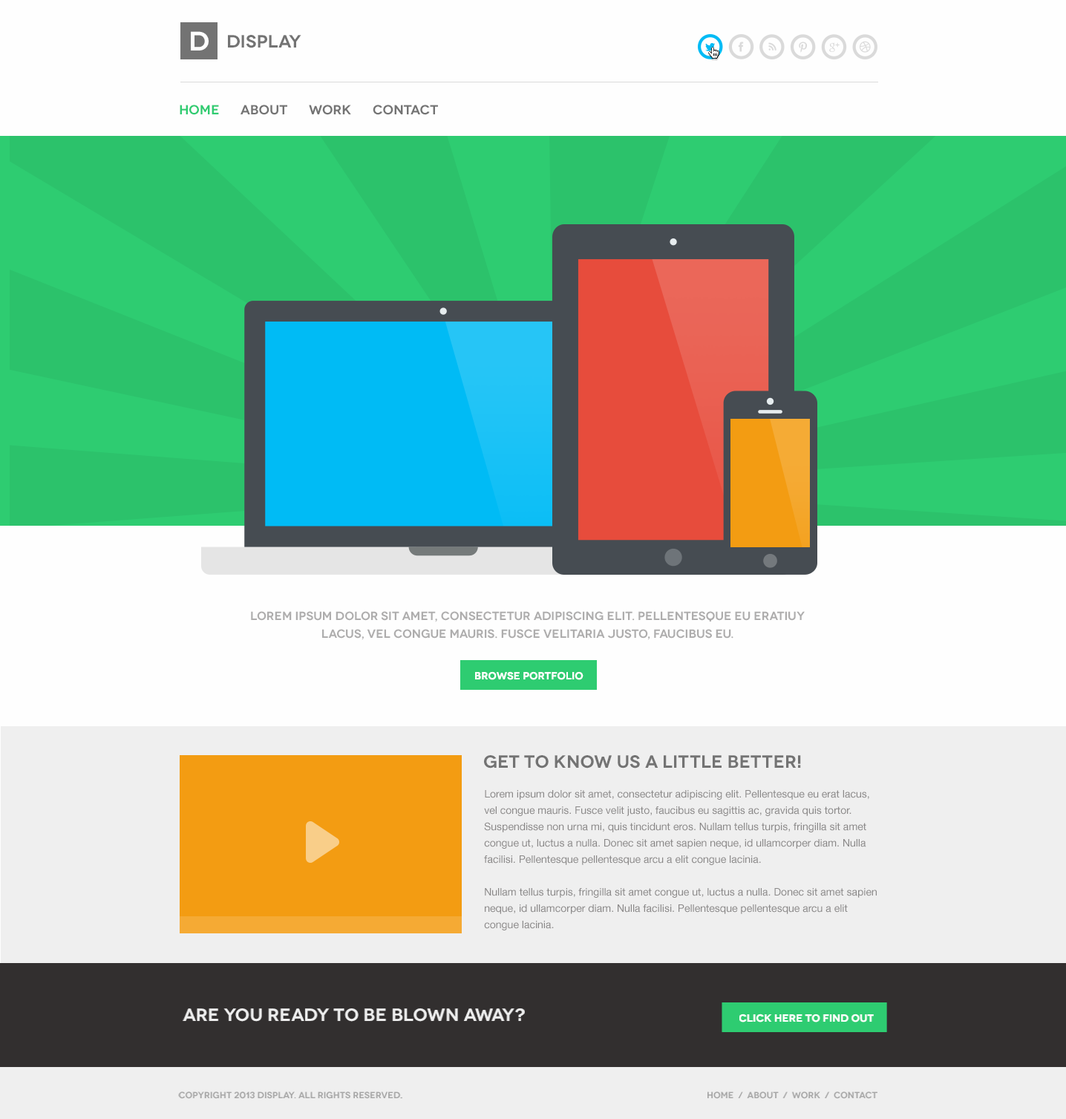
<style>
.page{position:relative;width:1066px;height:1119px;background:#fefefe}
.page>*{position:absolute;margin:0}
.t1{font:26.7px "Novecentowide-DemiBold";color:#ffffff}
.t2{font:17.8px "Novecentowide-DemiBold";color:#737373}
.t3{font:13.4px "Novecentowide-DemiBold";color:#2ecc71}
.t4{font:13.4px "Novecentowide-DemiBold";color:#737373}
.t5{font:11.9px/17.8px "Novecentowide-DemiBold";color:#aeadad}
.t6{font:10.4px "Novecentowide-DemiBold";color:#ffffff;text-transform:uppercase}
.t7{font:10.4px/16.3px "HelveticaNeue";color:#8a8888}
.t8{font:17.8px "Novecentowide-DemiBold";color:#efefef}
.t9{font:8.9px "Novecentowide-DemiBold";color:#a5a5a5;text-transform:uppercase}
</style>
<div class="page">
<p class="t1" style="left:191px;top:31px;width:18px;height:19px">D</p>
<p class="t2" style="left:228px;top:35px;width:73px;height:13px">Display</p>
<p class="t3" style="left:180px;top:105px;width:39px;height:10px">Home</p>
<p class="t4" style="left:241px;top:105px;width:46px;height:10px">About</p>
<p class="t4" style="left:309px;top:105px;width:42px;height:10px">Work</p>
<p class="t4" style="left:373px;top:105px;width:65px;height:10px">Contact</p>
<p class="t5" style="left:251px;top:611px;width:554px;height:29px;text-align:center">Lorem ipsum dolor sit amet, consectetur adipiscing elit. Pellentesque eu eratiuy lacus, vel congue mauris. Fusce velitaria justo, faucibus eu.</p>
<p class="t6" style="left:475px;top:671px;width:108px;height:9px">Browse Portfolio</p>
<p class="t2" style="left:484px;top:755px;width:317px;height:13px">Get To Know Us a Little Better!</p>
<p class="t7" style="left:484px;top:790px;width:393px;height:140px">Lorem ipsum dolor sit amet, consectetur adipiscing elit. Pellentesque eu erat lacus, vel congue mauris. Fusce velit justo, faucibus eu sagittis ac, gravida quis tortor. Suspendisse non urna mi, quis tincidunt eros. Nullam tellus turpis, fringilla sit amet congue ut, luctus a nulla. Donec sit amet sapien neque, id ullamcorper diam. Nulla facilisi. Pellentesque pellentesque arcu a elit congue lacinia.<br><br>Nullam tellus turpis, fringilla sit amet congue ut, luctus a nulla. Donec sit amet sapien neque, id ullamcorper diam. Nulla facilisi. Pellentesque pellentesque arcu a elit congue lacinia.</p>
<p class="t8" style="left:183px;top:1008px;width:342px;height:13px">Are You Ready To Be Blown Away?</p>
<p class="t6" style="left:739px;top:1013px;width:135px;height:9px">Click Here to Find Out</p>
<p class="t9" style="left:178px;top:1091px;width:224px;height:8px">Copyright 2013 Display. All Rights Reserved.</p>
<p class="t9" style="left:707px;top:1091px;width:170px;height:8px">Home  /  About  /  Work  /  Contact</p>
</div>
